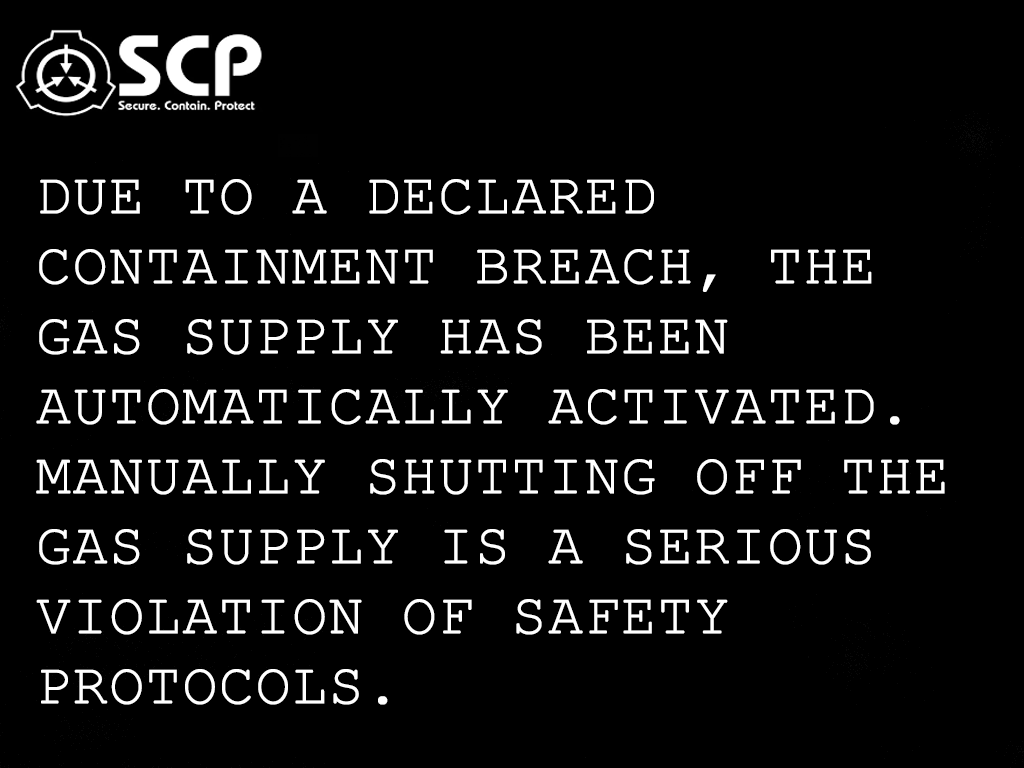
<style>
.page{position:relative;width:1024px;height:768px;background:#000000}
.page>*{position:absolute;margin:0}
.t1{font:58.3px "CourierNewPSMT";color:#ffffff;text-transform:uppercase;font-weight:bold}
.t2{font:29.2px "CourierNewPSMT";color:#ffffff;text-transform:uppercase;font-weight:bold}
</style>
<div class="page">
<p class="t1" style="left:36px;top:179px;width:909px;height:526px;text-align:justify"><span class="t2"><br></span>Due to a declared containment breach, the gas supply has been automatically activated. Manually shutting off the gas supply is a serious violation of safety protocols.</p>
</div>
